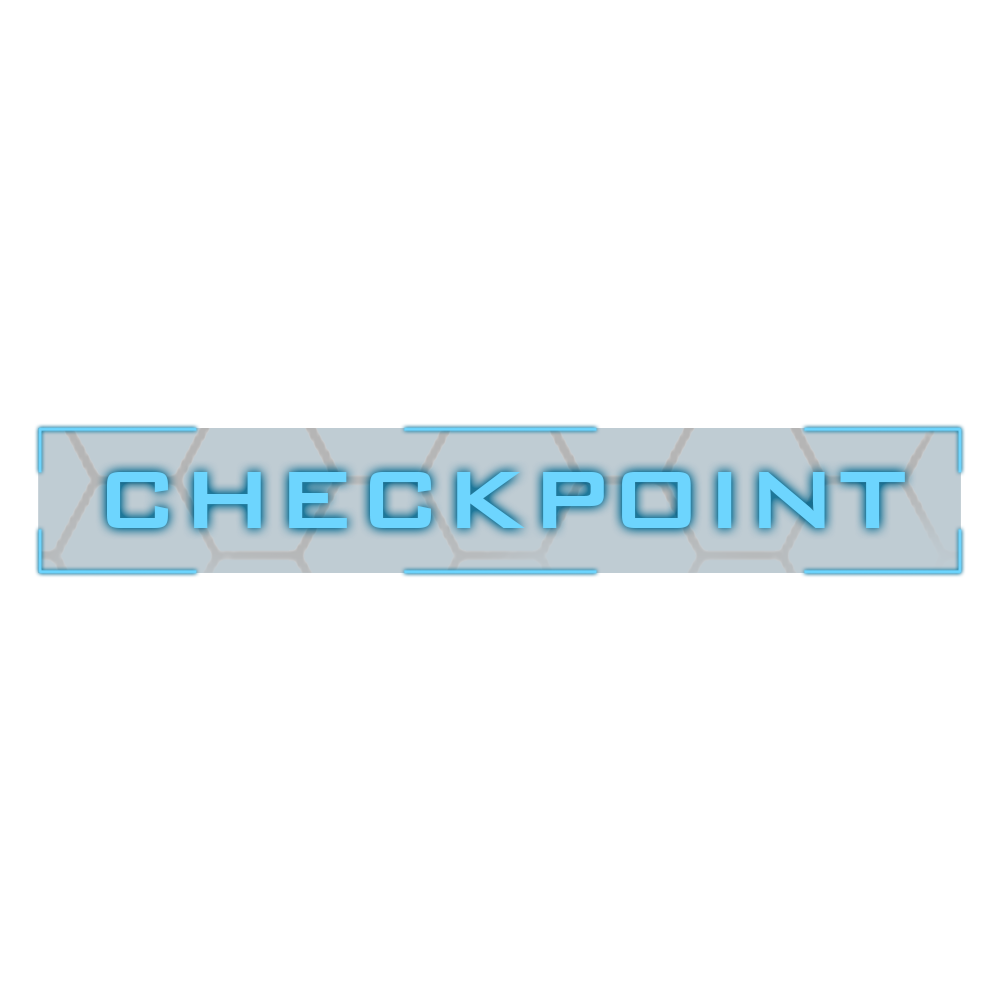
<style>
.page{position:relative;width:1000px;height:1000px;background:#ffffff}
.page>*{position:absolute;margin:0}
.t1{font:107.9px "BankGothicBT-Medium";color:#6dd5fe}
</style>
<div class="page">
<p class="t1" style="left:107px;top:472px;width:798px;height:56px">CHECKPOINT</p>
</div>
